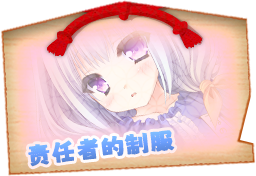
<style>
.page{position:relative;width:256px;height:176px}
.page>*{position:absolute;margin:0}
.t1{font:24px "MaokenAssortedSans";font-weight:bold}
</style>
<div class="page">
<p class="t1" style="left:28px;top:130px;width:147px;height:37px;rotate:-7deg">责任者的制服</p>
</div>
